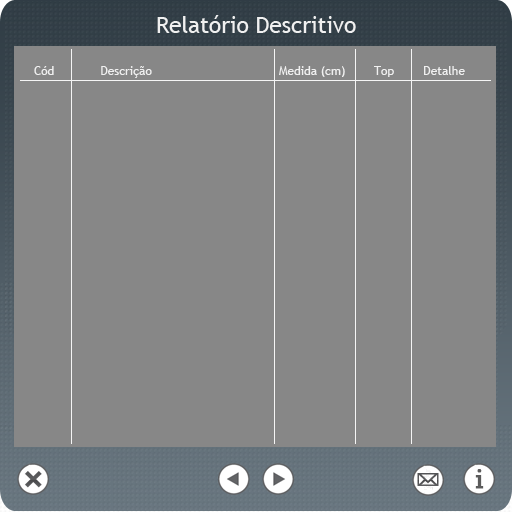
<style>
.page{position:relative;width:512px;height:512px;background:#878787}
.page>*{position:absolute;margin:0}
.t1{font:22.7px "TrebuchetMS";color:#f0f0f0}
.t2{font:12px "TrebuchetMS";color:#f0f0f0}
</style>
<div class="page">
<p class="t1" style="left:157px;top:15px;width:199px;height:18px">Relatório Descritivo</p>
<p class="t2" style="left:34px;top:66px;width:20px;height:9px">Cód</p>
<p class="t2" style="left:101px;top:66px;width:51px;height:12px">Descrição</p>
<p class="t2" style="left:279px;top:66px;width:66px;height:11px">Medida (cm)</p>
<p class="t2" style="left:374px;top:66px;width:20px;height:11px">Top</p>
<p class="t2" style="left:424px;top:66px;width:41px;height:9px">Detalhe</p>
</div>
